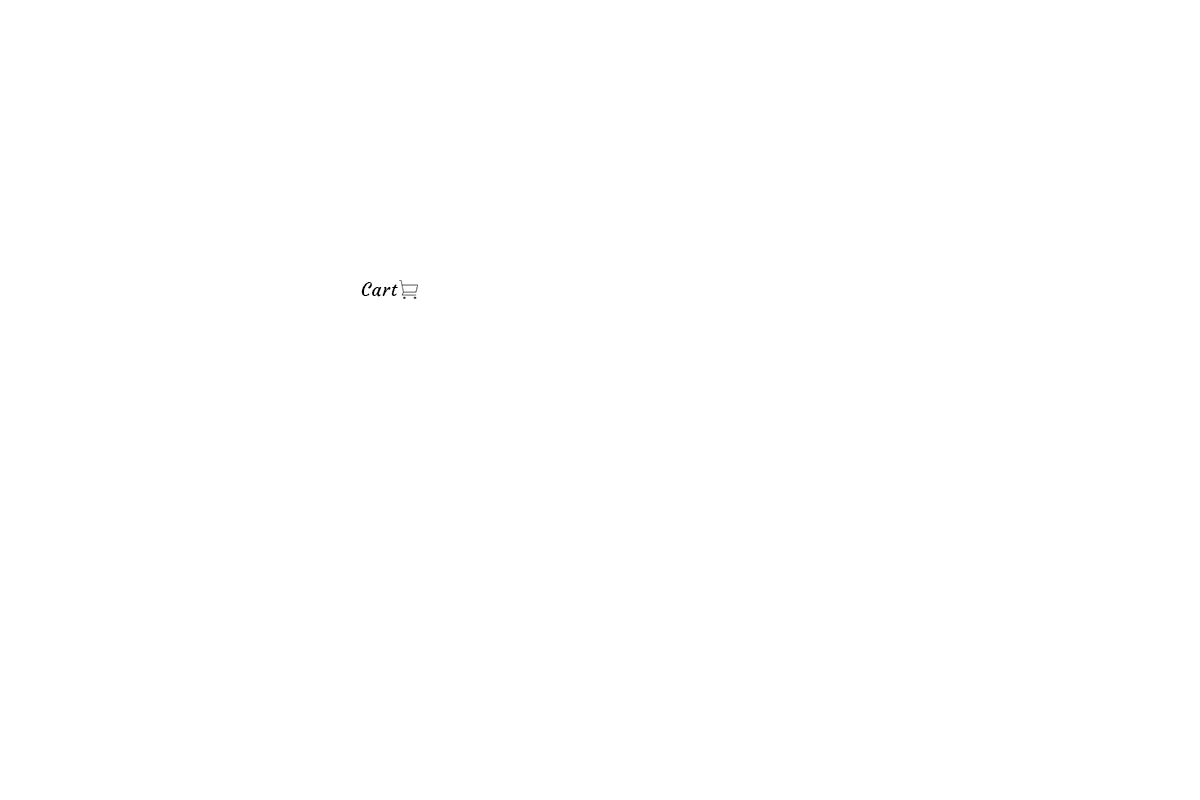
<style>
.page{position:relative;width:1200px;height:800px;background:#ffffff}
.page>*{position:absolute;margin:0}
.t1{font:18px "Courgette-Regular";letter-spacing:0.05em;color:#000000}
</style>
<div class="page">
<p class="t1" style="left:361px;top:282px;width:37px;height:15px">Cart</p>
</div>
